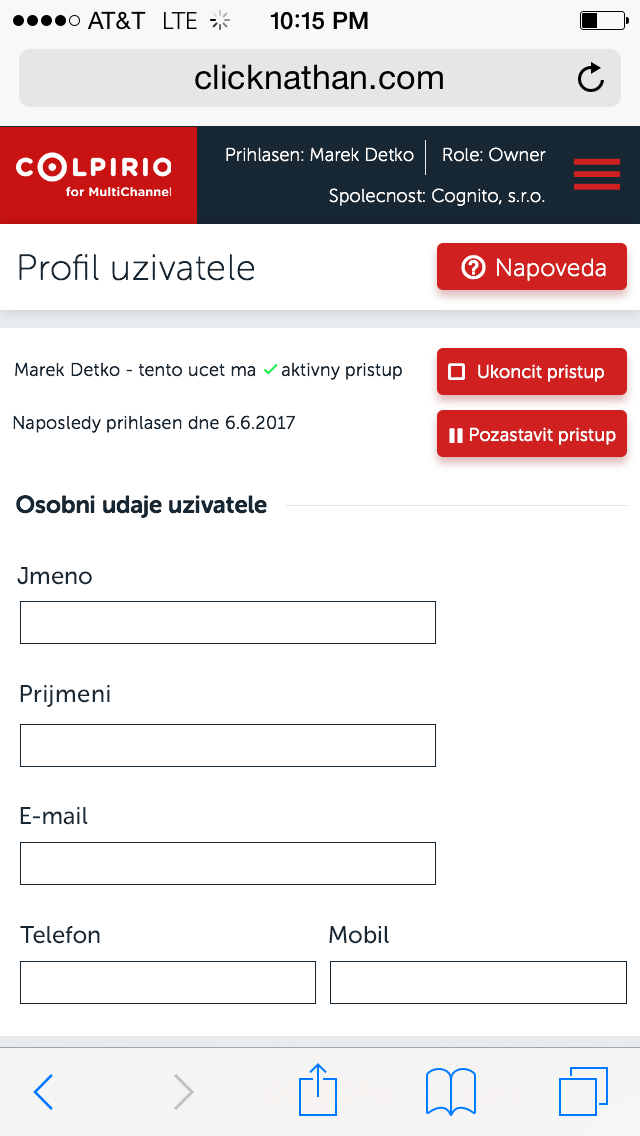
<style>
.page{position:relative;width:640px;height:1136px;background:#ffffff}
.page>*{position:absolute;margin:0}
.t1{font:18px "MuseoSansRounded-100";letter-spacing:0.025em;color:#ffffff}
.t2{font:36px "MuseoSansRounded-100";letter-spacing:0.025em;color:#172734}
.t3{font:24px "MuseoSansRounded-100";letter-spacing:0.025em;color:#ffffff}
.t4{font:18px "MuseoSansRounded-300";letter-spacing:0.025em;color:#ffffff}
.t5{font:18px "MuseoSansRounded-300";letter-spacing:0.025em;color:#172734}
.t6{font:24px "MuseoSansRounded-700";color:#172734}
.t7{font:24px "MuseoSansRounded-500";color:#172734}
.t8{font:24px "MuseoSansRounded-500";letter-spacing:0.025em;color:#172734}
</style>
<div class="page">
<p class="t1" style="left:226px;top:147px;width:188px;height:15px">Prihlasen: Marek Detko</p>
<p class="t1" style="left:443px;top:147px;width:103px;height:15px">Role: Owner</p>
<p class="t1" style="left:329px;top:188px;width:216px;height:18px">Spolecnost: Cognito, s.r.o.</p>
<p class="t2" style="left:19px;top:254px;width:236px;height:27px">Profil uzivatele</p>
<p class="t3" style="left:497px;top:258px;width:109px;height:23px">Napoveda</p>
<p class="t4" style="left:478px;top:364px;width:126px;height:18px">Ukoncit pristup</p>
<p class="t5" style="left:13px;top:415px;width:282px;height:18px">Naposledy prihlasen dne 6.6.2017</p>
<p class="t4" style="left:470px;top:427px;width:146px;height:18px">Pozastavit pristup</p>
<p class="t6" style="left:16px;top:495px;width:251px;height:23px">Osobni udaje uzivatele</p>
<p class="t7" style="left:17px;top:567px;width:75px;height:18px">Jmeno</p>
<p class="t8" style="left:20px;top:685px;width:90px;height:22px">Prijmeni</p>
<p class="t7" style="left:20px;top:807px;width:68px;height:18px">E-mail</p>
<p class="t7" style="left:20px;top:926px;width:80px;height:18px">Telefon</p>
<p class="t7" style="left:329px;top:926px;width:60px;height:18px">Mobil</p>
</div>
